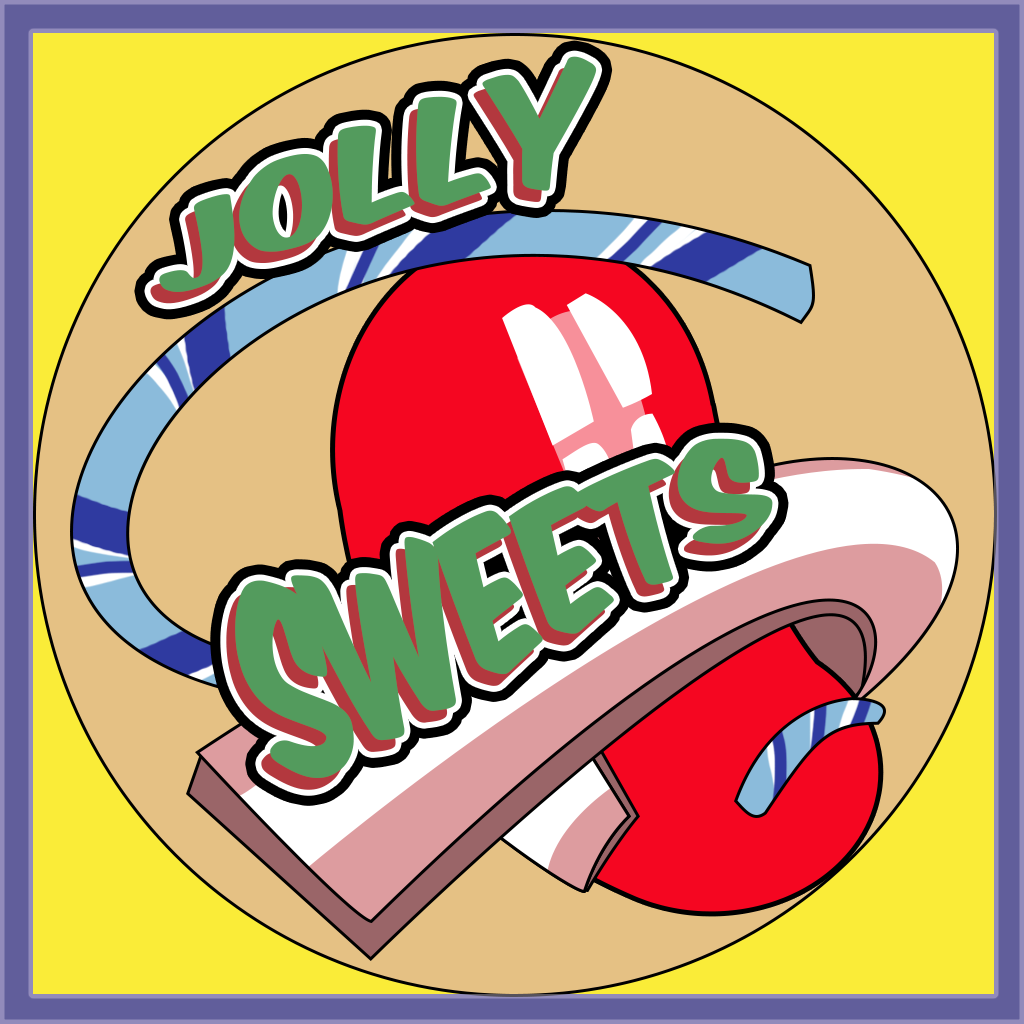
<style>
.page{position:relative;width:1024px;height:1024px;background:#e5c184}
.page>*{position:absolute;margin:0}
.t1{font:122.2px "KomikaAxis";color:#539b5d;scale:1.1 1}
.t2{font:140.5px "KomikaAxis";color:#539b5d}
.t3{font:140.5px "KomikaAxis"}
</style>
<div class="page">
<p class="t1" style="left:159px;top:56px;width:438px;height:236px;rotate:-14deg">JOLLY</p>
<p class="t2" style="left:235px;top:438px;width:538px;height:340px;rotate:-30deg">SWEETS</p>
<p class="t3" style="left:226px;top:450px;width:538px;height:340px;rotate:-30deg">SWEETS</p>
</div>
